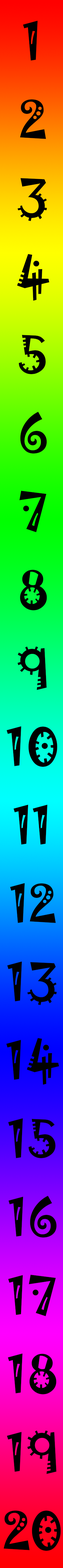
<style>
.page{position:relative;width:63px;height:1568px}
.page>*{position:absolute;margin:0}
.t1{font:47px/78.4px "Jokerman-Regular";color:#000000}
</style>
<div class="page">
<p class="t1" style="left:3px;top:21px;width:58px;height:1530px;text-align:center">1<br>2<br>3<br>4<br>5<br>6<br>7<br>8<br>9<br>10<br>11<br>12<br>13<br>14<br>15<br>16<br>17<br>18<br>19<br>20</p>
</div>
